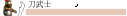
<style>
.page{position:relative;width:127px;height:16px;background:#ffffff}
.page>*{position:absolute;margin:0}
.t1{font:8px "SimSun";letter-spacing:-0.05em;text-transform:uppercase}
</style>
<div class="page">
<p class="t1" style="left:28px;top:0px;width:23px;height:8px">刀武士</p>
</div>
